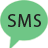
<style>
.page{position:relative;width:48px;height:48px;background:#6fc686}
.page>*{position:absolute;margin:0}
.t1{font:18px "MyriadPro-Regular";letter-spacing:0.05em;color:#222222}
</style>
<div class="page">
<p class="t1" style="left:8px;top:14px;width:33px;height:13px">SMS</p>
</div>
